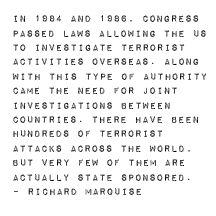
<style>
.page{position:relative;width:216px;height:216px;background:#ffffff}
.page>*{position:absolute;margin:0}
.t1{font:12px "ImpactLabelReversed";color:#000000}
</style>
<div class="page">
<p class="t1" style="left:12px;top:15px;width:194px;height:180px">In 1984 and 1986, Congress passed laws allowing the US to investigate terrorist activities overseas. Along with this type of authority came the need for joint<br>investigations between <br>countries. There have been <br>hundreds of terrorist <br>attacks across the world, but very few of them are actually state sponsored. <br>– Richard Marquise</p>
</div>
